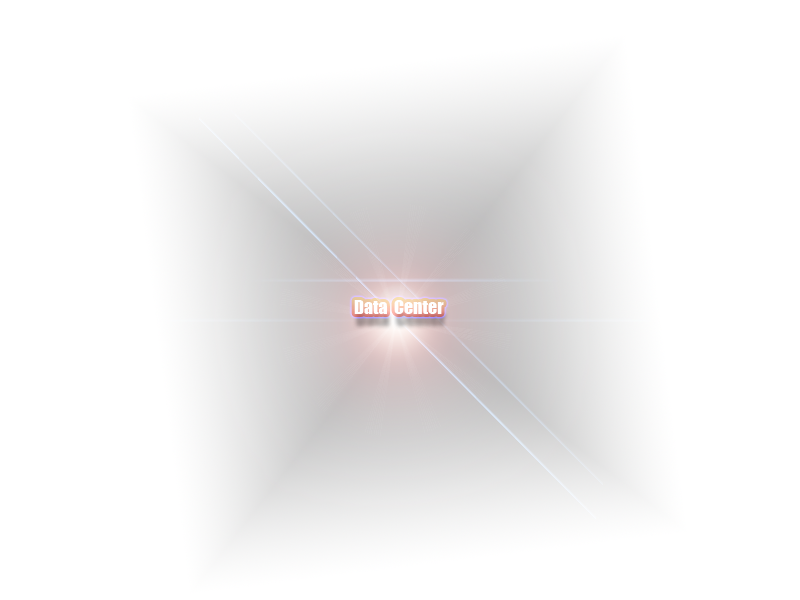
<style>
.page{position:relative;width:800px;height:600px;background:#ffffff}
.page>*{position:absolute;margin:0}
.t1{font:18px "Impact";color:#ffffff}
</style>
<div class="page">
<p class="t1" style="left:354px;top:300px;width:90px;height:14px">Data  Center</p>
</div>
